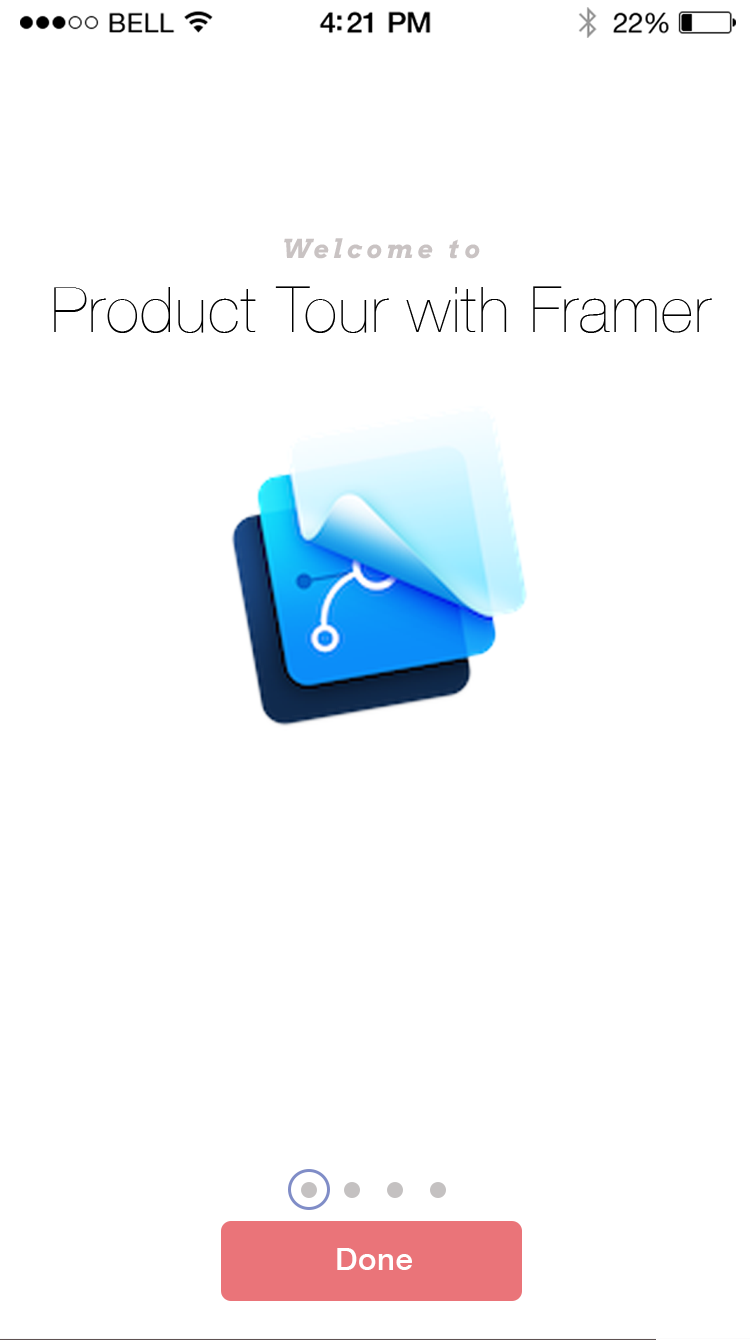
<style>
.page{position:relative;width:750px;height:1340px;background:#ffffff}
.page>*{position:absolute;margin:0}
.t1{font:62.5px/74.4px "HelveticaNeue-UltraLight";letter-spacing:0.025em;color:#000000}
.t2{font:26px/37.7px "Arvo-BoldItalic";letter-spacing:0.185em;color:#c9c3c3}
.t3{font:30.8px "HelveticaNeue-Medium";letter-spacing:0.025em;color:#ffffff}
</style>
<div class="page">
<p class="t1" style="left:54px;top:238px;width:658px;height:95px;text-align:center"><span class="t2">Welcome to<br></span>Product Tour with Framer</p>
<p class="t3" style="left:337px;top:1248px;width:75px;height:22px">Done</p>
</div>
